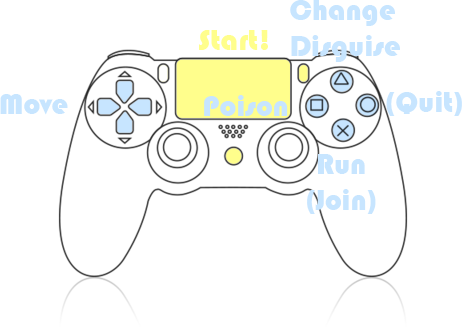
<style>
.page{position:relative;width:464px;height:327px;background:#ffffff}
.page>*{position:absolute;margin:0}
.t1{font:30px "Bauhaus93";color:#c7e5ff}
.t2{font:30px "Bauhaus93";color:#fffe8c}
</style>
<div class="page">
<p class="t1" style="left:290px;top:0px;width:110px;height:62px">Change<br>Disguise</p>
<p class="t2" style="left:199px;top:30px;width:69px;height:20px">Start!</p>
<p class="t1" style="left:0px;top:94px;width:68px;height:21px">Move</p>
<p class="t1" style="left:204px;top:95px;width:84px;height:21px">Poison</p>
<p class="t1" style="left:386px;top:91px;width:76px;height:25px">(Quit)</p>
<p class="t1" style="left:307px;top:154px;width:69px;height:60px;text-align:center">Run<br>(Join)</p>
</div>
